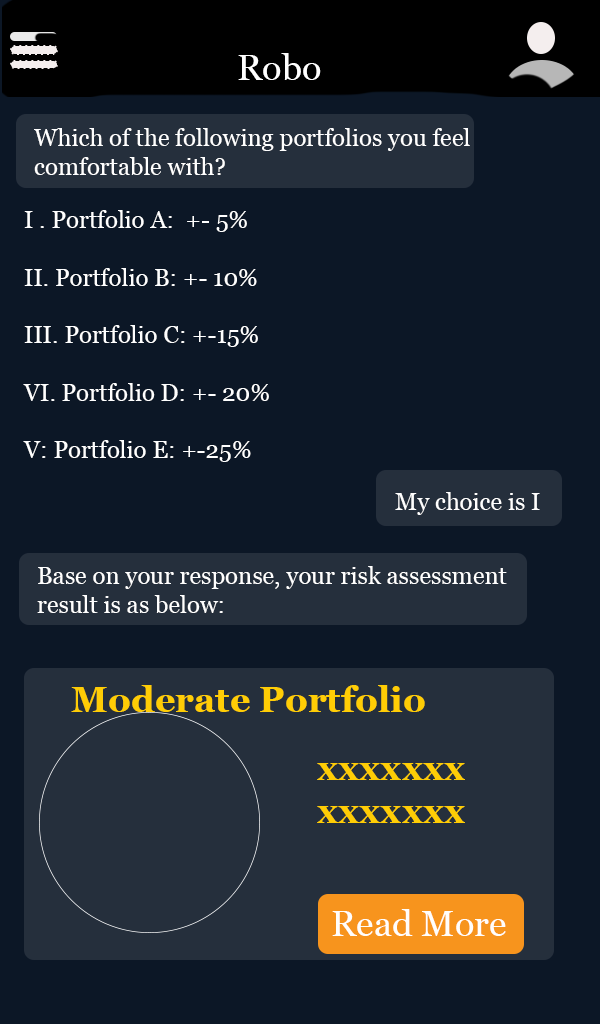
<style>
.page{position:relative;width:600px;height:1024px;background:#0c1726}
.page>*{position:absolute;margin:0}
.t1{font:36px "Georgia";color:#ffffff}
.t2{font:24px "Georgia";color:#ffffff}
.t3{font:36px "Georgia-Bold";color:#ffcd05}
.t4{font:36px "Georgia";color:#fffefc}
</style>
<div class="page">
<p class="t1" style="left:238px;top:53px;width:83px;height:27px">Robo</p>
<p class="t2" style="left:34px;top:128px;width:436px;height:47px">Which of the following portfolios you feel <br>comfortable with?</p>
<p class="t2" style="left:23px;top:210px;width:246px;height:252px">I . Portfolio A:  +- 5% <br><br>II. Portfolio B: +- 10%<br><br>III. Portfolio C: +-15%<br><br>VI. Portfolio D: +- 20%<br><br>V: Portfolio E: +-25%</p>
<p class="t2" style="left:395px;top:492px;width:145px;height:23px">My choice is I</p>
<p class="t2" style="left:37px;top:566px;width:470px;height:47px">Base on your response, your risk assessment <br>result is as below:</p>
<p class="t3" style="left:71px;top:685px;width:354px;height:27px">Moderate Portfolio</p>
<p class="t3" style="left:317px;top:763px;width:148px;height:60px">xxxxxxx<br>xxxxxxx</p>
<p class="t4" style="left:332px;top:909px;width:174px;height:27px">Read More</p>
</div>
